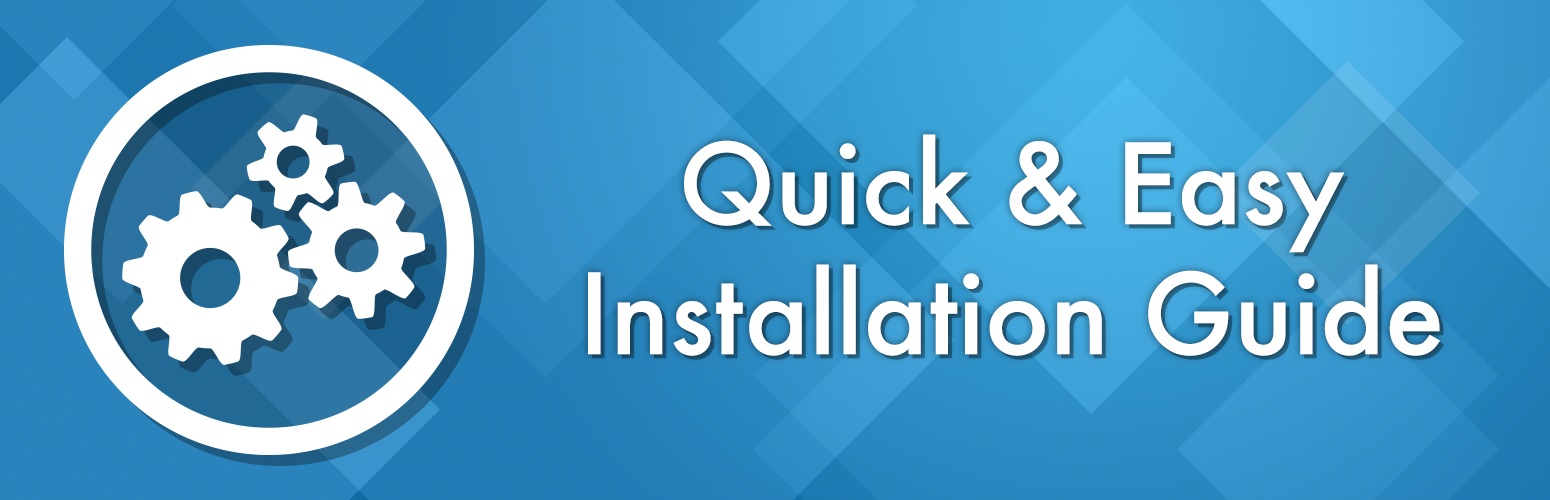
<style>
.page{position:relative;width:1550px;height:500px}
.page>*{position:absolute;margin:0}
.t1{font:108.3px "Futura-Medium";color:#ffffff}
</style>
<div class="page">
<p class="t1" style="left:588px;top:134px;width:852px;height:222px;text-align:center">Quick &amp; Easy<br>Installation Guide</p>
</div>
